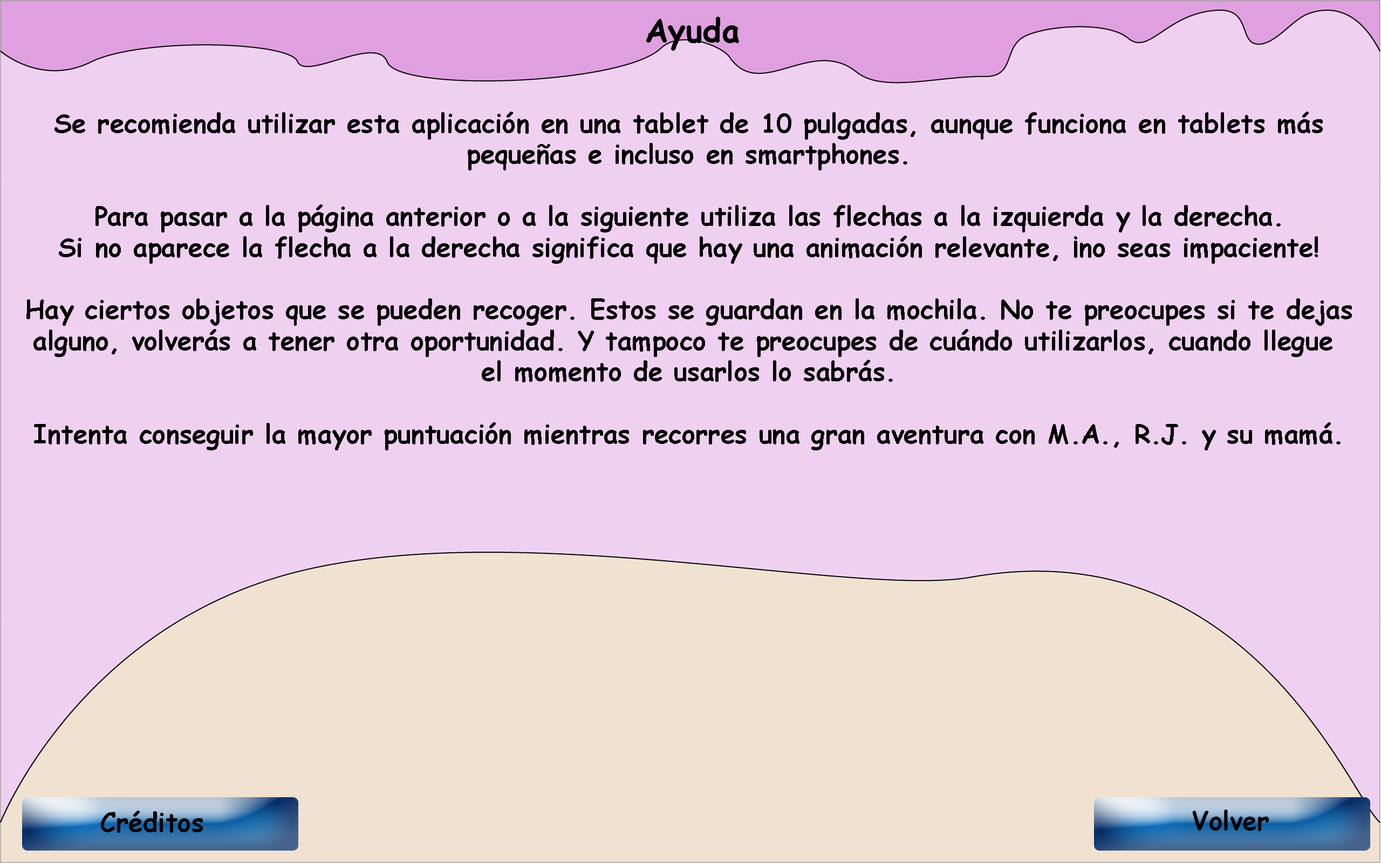
<style>
.page{position:relative;width:1381px;height:863px;background:#efd0f0}
.page>*{position:absolute;margin:0}
.t1{font:32.4px "ComicSansMS-Bold";color:#000000}
.t2{font:25.9px "ComicSansMS-Bold";color:#000000}
</style>
<div class="page">
<p class="t1" style="left:646px;top:17px;width:93px;height:34px">Ayuda</p>
<p class="t2" style="left:26px;top:112px;width:1326px;height:339px;text-align:center">Se recomienda utilizar esta aplicación en una tablet de 10 pulgadas, aunque funciona en tablets más<br>pequeñas e incluso en smartphones.<br><br>Para pasar a la página anterior o a la siguiente utiliza las flechas a la izquierda y la derecha.<br>Si no aparece la flecha a la derecha significa que hay una animación relevante, ¡no seas impaciente!<br><br>Hay ciertos objetos que se pueden recoger. Estos se guardan en la mochila. No te preocupes si te dejas<br>alguno, volverás a tener otra oportunidad. Y tampoco te preocupes de cuándo utilizarlos, cuando llegue <br>el momento de usarlos lo sabrás.<br><br>Intenta conseguir la mayor puntuación mientras recorres una gran aventura con M.A., R.J. y su mamá.</p>
<p class="t2" style="left:1192px;top:810px;width:78px;height:21px">Volver</p>
<p class="t2" style="left:101px;top:811px;width:102px;height:22px">Créditos</p>
</div>
